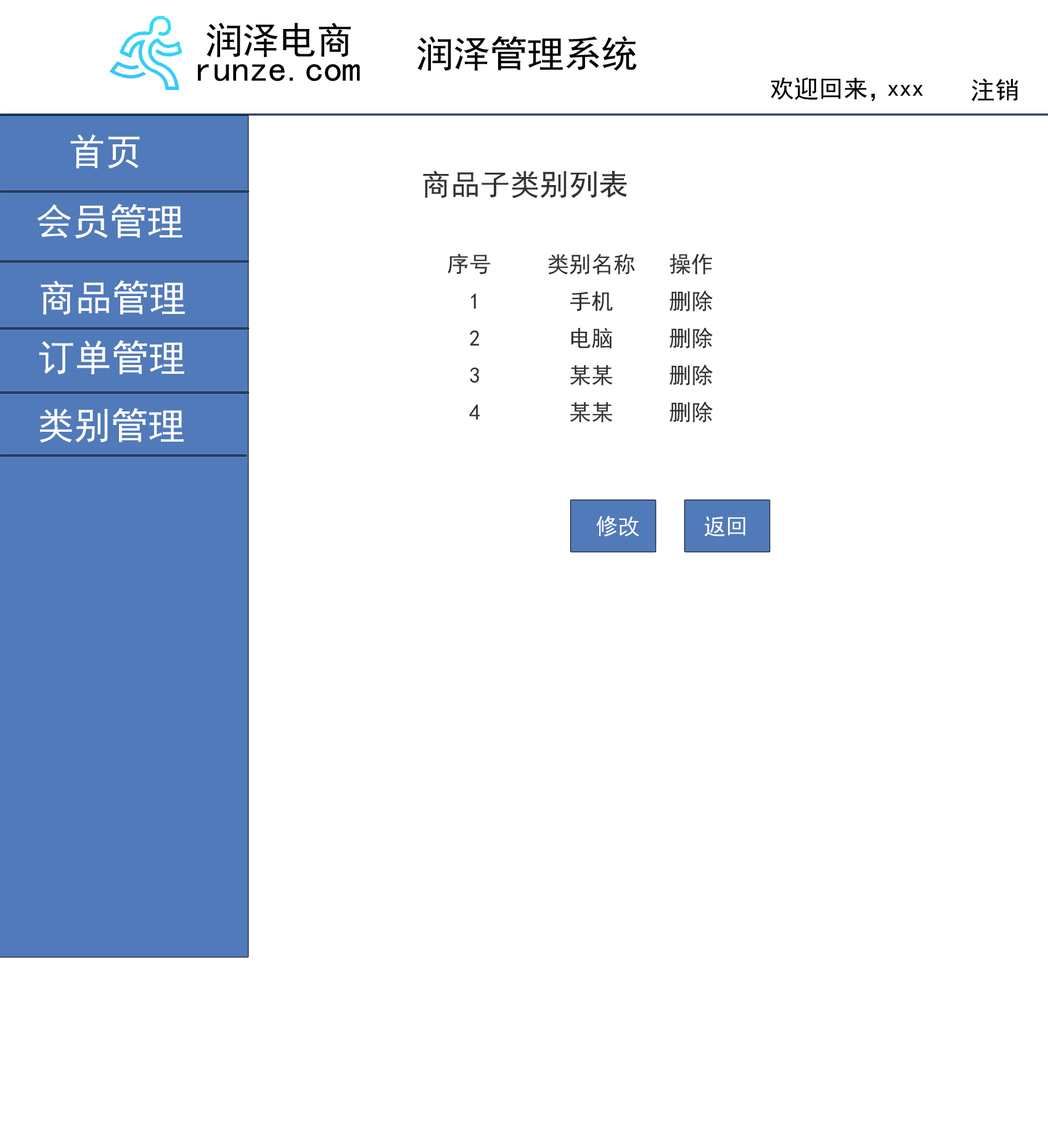
<style>
.page{position:relative;width:1048px;height:1138px;background:#ffffff}
.page>*{position:absolute;margin:0}
.t1{font:37px "SimHei";color:#010101}
.t2{font:24.7px "SimHei";color:#000000}
.t3{font:37px "SimHei";color:#ffffff}
.t4{font:29.6px "SimHei";color:#333333}
.t5{font:22.2px/18.5px "SimHei";color:#333333}
.t6{font:22.2px "SimHei";color:#ffffff}
</style>
<div class="page">
<p class="t1" style="left:207px;top:23px;width:144px;height:34px">润泽电商</p>
<p class="t1" style="left:417px;top:36px;width:220px;height:35px">润泽管理系统</p>
<p class="t1" style="left:198px;top:64px;width:162px;height:17px">runze.com</p>
<p class="t2" style="left:771px;top:77px;width:104px;height:24px">欢迎回来，</p>
<p class="t2" style="left:888px;top:84px;width:35px;height:12px">xxx</p>
<p class="t2" style="left:972px;top:78px;width:47px;height:24px">注销</p>
<p class="t3" style="left:70px;top:134px;width:70px;height:34px">首页</p>
<p class="t4" style="left:423px;top:170px;width:204px;height:29px">商品子类别列表</p>
<p class="t3" style="left:37px;top:203px;width:146px;height:36px">会员管理</p>
<p class="t5" style="left:448px;top:253px;width:265px;height:169px">序号     类别名称   操作<br> <br>  1        手机     删除<br><br>  2        电脑     删除<br><br>  3        某某     删除<br><br>  4        某某     删除</p>
<p class="t3" style="left:41px;top:280px;width:144px;height:35px">商品管理</p>
<p class="t3" style="left:39px;top:340px;width:145px;height:34px">订单管理</p>
<p class="t3" style="left:39px;top:408px;width:145px;height:35px">类别管理</p>
<p class="t6" style="left:596px;top:515px;width:43px;height:21px">修改</p>
<p class="t6" style="left:704px;top:516px;width:41px;height:20px">返回</p>
</div>
